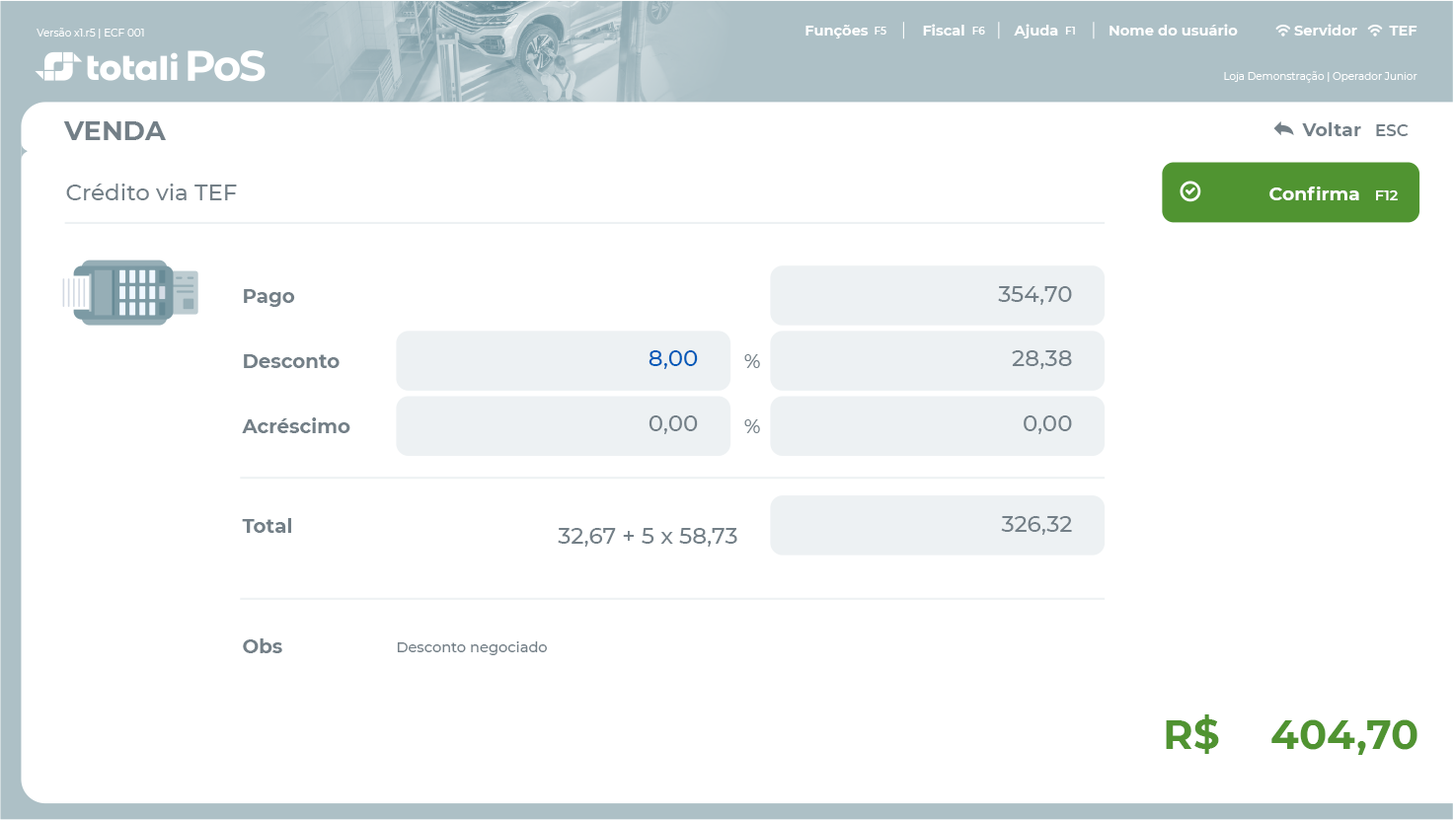
<style>
.page{position:relative;width:1454px;height:820px;background:#ffffff}
.page>*{position:absolute;margin:0}
.t1{font:10.3px "Montserrat-Regular";color:#ffffff}
.t2{font:14.4px "Montserrat-Bold";color:#ffffff}
.t3{font:10.3px "Montserrat-SemiBold";color:#ffffff}
.t4{font:26.7px "Montserrat-Bold";color:#748088}
.t5{font:18.5px "Montserrat-Bold";color:#748088}
.t6{font:16.4px "Montserrat-SemiBold";color:#748088}
.t7{font:22.6px "Montserrat-Medium";color:#748088}
.t8{font:18.5px "Montserrat-Bold";color:#ffffff}
.t9{font:14.4px "Montserrat-SemiBold";color:#ffffff}
.t10{font:19.5px "Montserrat-Bold";color:#748088}
.t11{font:22.6px "Montserrat-Medium";color:#005bb9}
.t12{font:19.5px "Montserrat-Medium";color:#748088}
.t13{font:14.4px "Montserrat-Medium";color:#748088}
.t14{font:41.1px "Montserrat-Bold";color:#509431}
</style>
<div class="page">
<p class="t1" style="left:37px;top:28px;width:107px;height:10px">Versão x1.r5 | ECF 001</p>
<p class="t2" style="left:805px;top:25px;width:64px;height:13px">Funções</p>
<p class="t3" style="left:874px;top:27px;width:12px;height:8px">F5</p>
<p class="t2" style="left:923px;top:24px;width:41px;height:12px">Fiscal</p>
<p class="t3" style="left:972px;top:27px;width:13px;height:8px">F6</p>
<p class="t2" style="left:1014px;top:24px;width:44px;height:14px">Ajuda</p>
<p class="t3" style="left:1065px;top:27px;width:10px;height:8px">F1</p>
<p class="t2" style="left:1109px;top:24px;width:129px;height:12px">Nome do usuário</p>
<p class="t2" style="left:1294px;top:24px;width:63px;height:12px">Servidor</p>
<p class="t2" style="left:1389px;top:26px;width:28px;height:10px">TEF</p>
<p class="t1" style="left:1224px;top:71px;width:193px;height:12px">Loja Demonstração | Operador Junior</p>
<p class="t4" style="left:63px;top:121px;width:103px;height:19px">VENDA</p>
<p class="t5" style="left:1302px;top:122px;width:59px;height:14px">Voltar</p>
<p class="t6" style="left:1376px;top:124px;width:32px;height:12px">ESC</p>
<p class="t7" style="left:66px;top:184px;width:171px;height:16px">Crédito via TEF</p>
<p class="t8" style="left:1269px;top:187px;width:90px;height:13px">Confirma</p>
<p class="t9" style="left:1376px;top:190px;width:22px;height:10px">F12</p>
<p class="t10" style="left:244px;top:289px;width:51px;height:18px">Pago</p>
<p class="t7" style="left:998px;top:286px;width:74px;height:19px">354,70</p>
<p class="t11" style="left:648px;top:350px;width:50px;height:19px">8,00</p>
<p class="t7" style="left:1012px;top:350px;width:60px;height:19px">28,38</p>
<p class="t10" style="left:244px;top:354px;width:96px;height:14px">Desconto</p>
<p class="t12" style="left:744px;top:354px;width:16px;height:14px">%</p>
<p class="t10" style="left:242px;top:417px;width:108px;height:16px">Acréscimo</p>
<p class="t7" style="left:648px;top:416px;width:50px;height:18px">0,00</p>
<p class="t12" style="left:744px;top:419px;width:16px;height:14px">%</p>
<p class="t7" style="left:1024px;top:416px;width:48px;height:18px">0,00</p>
<p class="t10" style="left:242px;top:518px;width:49px;height:15px">Total</p>
<p class="t7" style="left:1001px;top:516px;width:71px;height:19px">326,32</p>
<p class="t7" style="left:558px;top:528px;width:179px;height:19px">32,67 + 5 x 58,73</p>
<p class="t10" style="left:243px;top:639px;width:39px;height:14px">Obs</p>
<p class="t13" style="left:397px;top:642px;width:150px;height:13px">Desconto negociado</p>
<p class="t14" style="left:1166px;top:715px;width:53px;height:39px">R$</p>
<p class="t14" style="left:1271px;top:720px;width:146px;height:35px">404,70</p>
</div>
